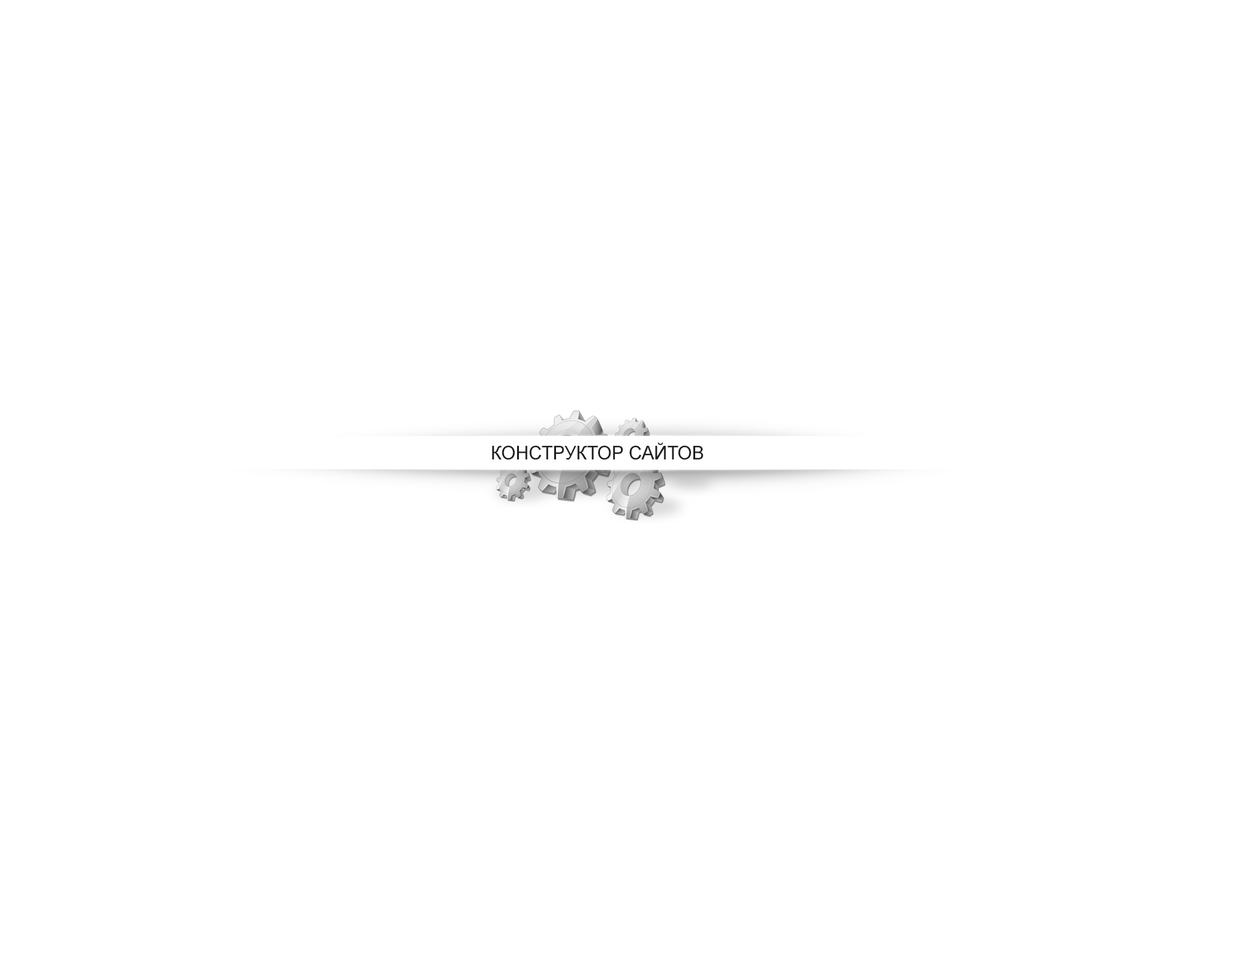
<style>
.page{position:relative;width:1237px;height:964px;background:#ffffff}
.page>*{position:absolute;margin:0}
.t1{font:19.1px "ArialMT";color:#1e1e1e;scale:0.96 1}
</style>
<div class="page">
<p class="t1" style="left:492px;top:442px;width:211px;height:18px">КОНСТРУКТОР САЙТОВ</p>
</div>
